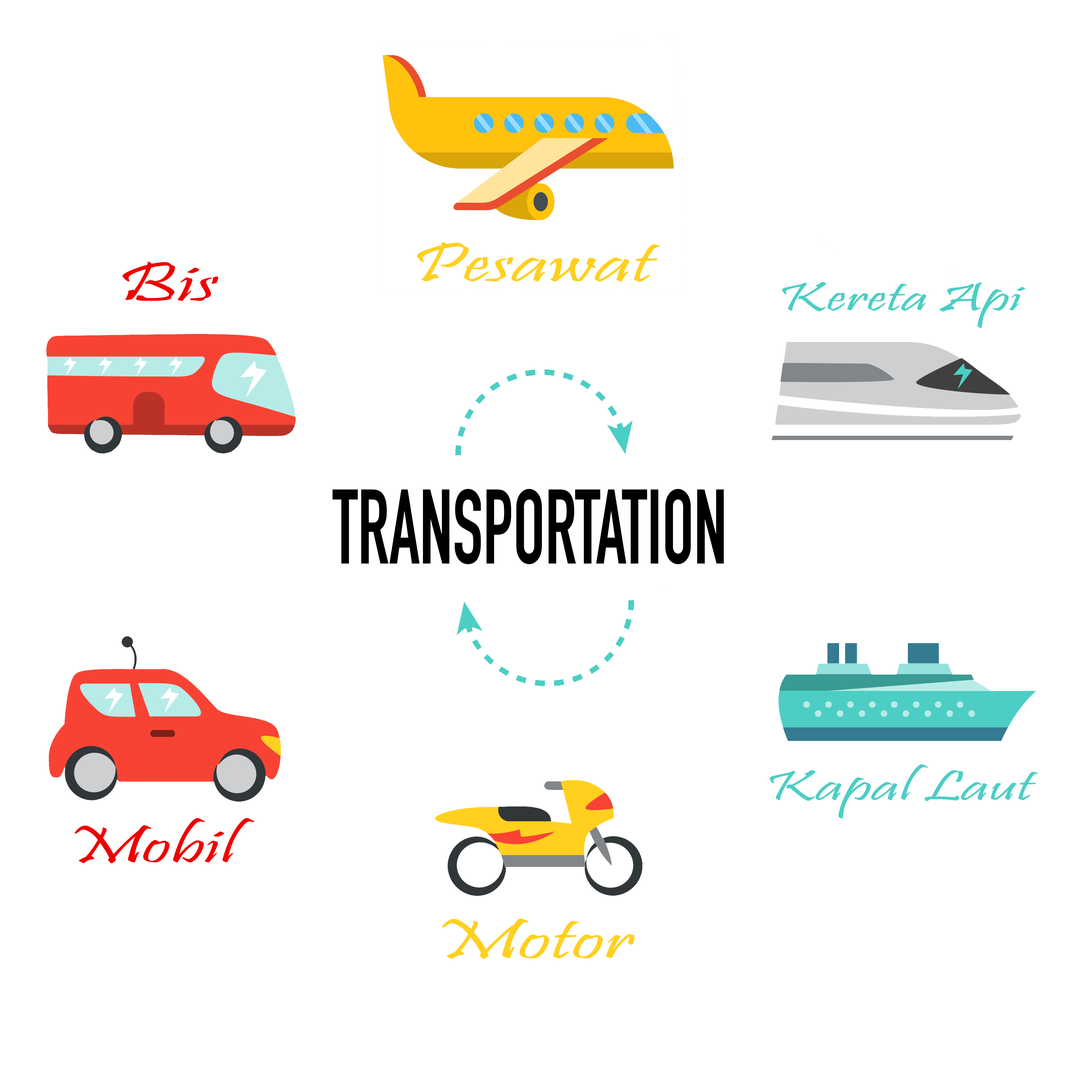
<style>
.page{position:relative;width:1092px;height:1092px;background:#ffffff}
.page>*{position:absolute;margin:0}
.t1{font:56.9px "Pristina-Regular";color:#ffd01f;scale:1.62 1}
.t2{font:56.9px "Pristina-Regular";color:#f00000;scale:1.62 1}
.t3{font:41.1px "Pristina-Regular";color:#4ccec4;scale:1.62 1}
.t4{font:43px "Pristina-Regular";color:#4ccec4;scale:1.62 1}
.t5{font:53.6px "Pristina-Regular";color:#f00000;scale:1.52 1}
</style>
<div class="page">
<p class="t1" style="left:417px;top:242px;width:243px;height:40px">Pesawat</p>
<p class="t2" style="left:123px;top:262px;width:95px;height:39px">Bis</p>
<p class="t3" style="left:782px;top:282px;width:243px;height:46px">Kereta Api</p>
<p class="t4" style="left:770px;top:764px;width:268px;height:54px">Kapal Laut</p>
<p class="t5" style="left:74px;top:818px;width:180px;height:45px">Mobil</p>
<p class="t1" style="left:442px;top:919px;width:193px;height:40px">Motor</p>
</div>
